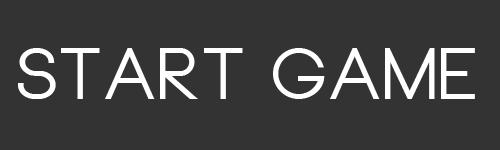
<style>
.page{position:relative;width:500px;height:150px;background:#333333}
.page>*{position:absolute;margin:0}
.t1{font:72px "Neou-Bold";color:#ffffff}
</style>
<div class="page">
<p class="t1" style="left:18px;top:48px;width:457px;height:51px">START GAME</p>
</div>
